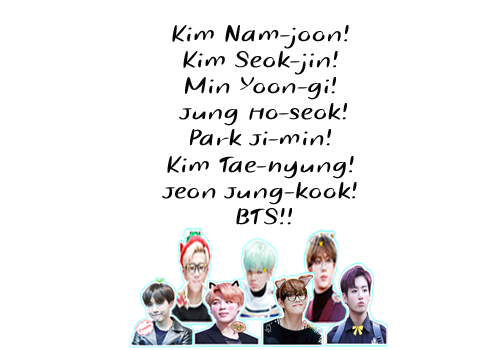
<style>
.page{position:relative;width:500px;height:350px;background:#ffffff}
.page>*{position:absolute;margin:0}
.t1{font:21.8px "Mother'sTouches";color:#070606;scale:1.43 1}
</style>
<div class="page">
<p class="t1" style="left:162px;top:25px;width:195px;height:200px;text-align:center">Kim Nam-joon! <br>Kim Seok-jin! <br>Min Yoon-gi! <br>Jung Ho-seok!<br>Park Ji-min! <br>Kim Tae-hyung! <br>Jeon Jung-kook! <br>BTS!!</p>
</div>
